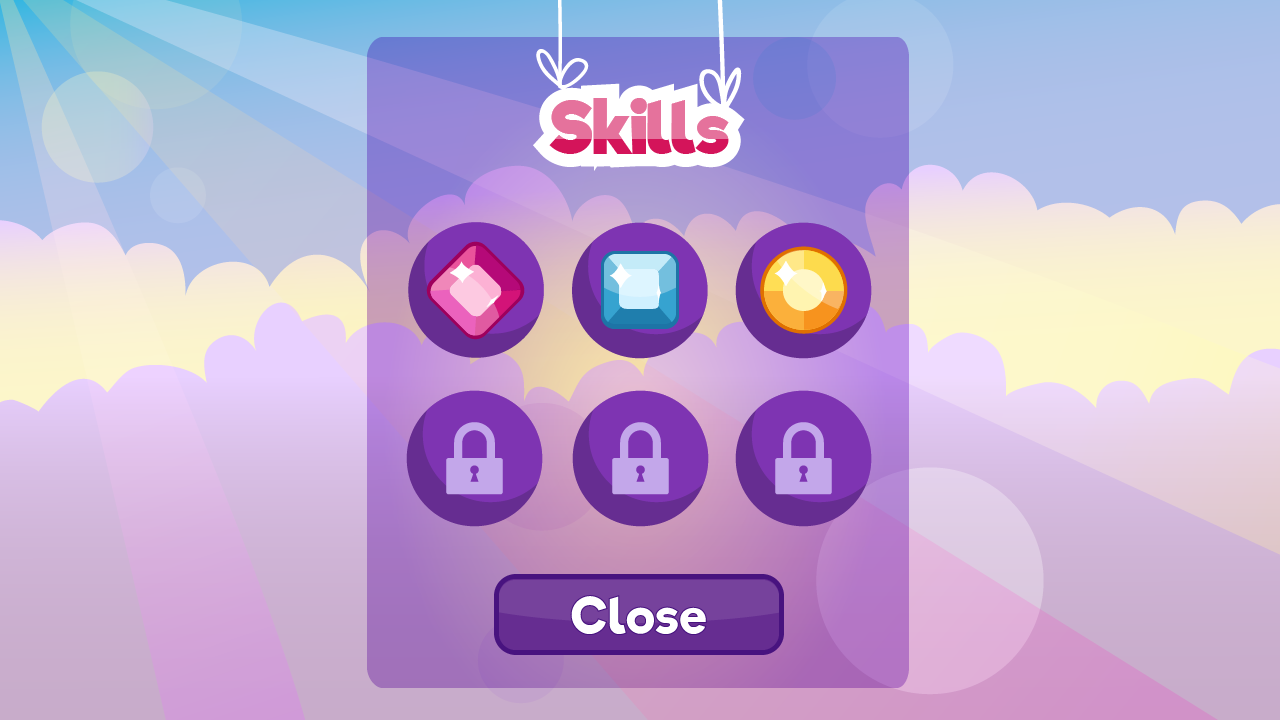
<style>
.page{position:relative;width:1280px;height:720px}
.page>*{position:absolute;margin:0}
.t1{font:70px "RifficFree-Bold"}
</style>
<div class="page">
<p class="t1" style="left:549px;top:98px;width:180px;height:56px">Skills</p>
<p class="t1" style="left:549px;top:98px;width:180px;height:56px">Skills</p>
</div>
